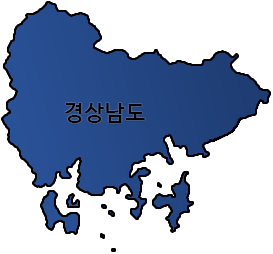
<style>
.page{position:relative;width:273px;height:254px;background:#ffffff}
.page>*{position:absolute;margin:0}
.t1{font:22px "HancomGothicBold";color:#000000}
</style>
<div class="page">
<p class="t1" style="left:64px;top:103px;width:81px;height:20px">경상남도</p>
</div>
